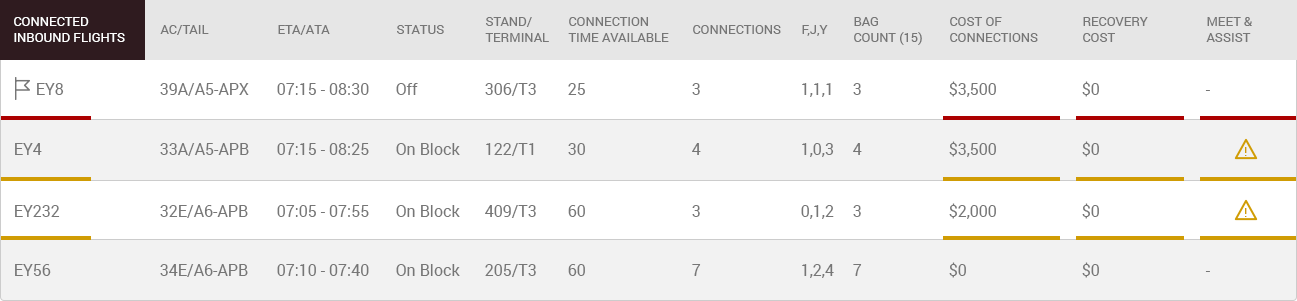
<style>
.page{position:relative;width:1297px;height:301px;background:#ffffff}
.page>*{position:absolute;margin:0}
.t1{font:13px "Roboto-Regular";color:#ffffff;text-transform:uppercase}
.t2{font:13px "Roboto-Regular";color:#767676;text-transform:uppercase}
.t3{font:16px "Roboto-Regular";color:#767676}
.t4{font:13.3px "Roboto-Regular";color:#d09c04}
</style>
<div class="page">
<p class="t1" style="left:14px;top:17px;width:111px;height:25px">Connected<br>Inbound Flights</p>
<p class="t2" style="left:485px;top:17px;width:64px;height:25px">Stand/<br>Terminal</p>
<p class="t2" style="left:568px;top:17px;width:101px;height:25px">Connection<br>Time Available</p>
<p class="t2" style="left:854px;top:17px;width:68px;height:28px">Bag<br>Count (15)</p>
<p class="t2" style="left:950px;top:17px;width:88px;height:25px">Cost of<br>Connections</p>
<p class="t2" style="left:1083px;top:17px;width:65px;height:25px">Recovery<br>Cost</p>
<p class="t2" style="left:1206px;top:17px;width:46px;height:25px">Meet &amp;<br>Assist</p>
<p class="t2" style="left:160px;top:25px;width:49px;height:10px">AC/Tail</p>
<p class="t2" style="left:278px;top:25px;width:52px;height:10px">Eta/Ata</p>
<p class="t2" style="left:397px;top:25px;width:47px;height:9px">Status</p>
<p class="t2" style="left:693px;top:25px;width:88px;height:9px">Connections</p>
<p class="t2" style="left:802px;top:25px;width:26px;height:11px">F,J,Y</p>
<p class="t3" style="left:37px;top:83px;width:27px;height:12px">EY8</p>
<p class="t3" style="left:160px;top:83px;width:89px;height:13px">39A/A5-APX</p>
<p class="t3" style="left:277px;top:83px;width:92px;height:12px">07:15 - 08:30</p>
<p class="t3" style="left:396px;top:83px;width:22px;height:12px">Off</p>
<p class="t3" style="left:485px;top:83px;width:51px;height:13px">306/T3</p>
<p class="t3" style="left:568px;top:83px;width:17px;height:12px">25</p>
<p class="t3" style="left:692px;top:83px;width:8px;height:12px">3</p>
<p class="t3" style="left:802px;top:83px;width:29px;height:14px">1,1,1</p>
<p class="t3" style="left:853px;top:83px;width:8px;height:12px">3</p>
<p class="t3" style="left:949px;top:81px;width:47px;height:16px">$3,500</p>
<p class="t3" style="left:1082px;top:81px;width:17px;height:16px">$0</p>
<p class="t3" style="left:1205px;top:90px;width:5px;height:1px">-</p>
<p class="t3" style="left:15px;top:143px;width:27px;height:12px">EY4</p>
<p class="t3" style="left:160px;top:143px;width:89px;height:13px">33A/A5-APB</p>
<p class="t3" style="left:277px;top:143px;width:92px;height:12px">07:15 - 08:25</p>
<p class="t3" style="left:396px;top:143px;width:64px;height:12px">On Block</p>
<p class="t3" style="left:486px;top:143px;width:48px;height:13px">122/T1</p>
<p class="t3" style="left:568px;top:143px;width:17px;height:12px">30</p>
<p class="t3" style="left:692px;top:143px;width:9px;height:12px">4</p>
<p class="t3" style="left:802px;top:143px;width:32px;height:14px">1,0,3</p>
<p class="t3" style="left:853px;top:143px;width:9px;height:12px">4</p>
<p class="t3" style="left:949px;top:141px;width:47px;height:16px">$3,500</p>
<p class="t3" style="left:1082px;top:141px;width:17px;height:16px">$0</p>
<p class="t4" style="left:1245px;top:147px;width:2px;height:9px">!</p>
<p class="t3" style="left:15px;top:205px;width:45px;height:12px">EY232</p>
<p class="t3" style="left:160px;top:205px;width:88px;height:13px">32E/A6-APB</p>
<p class="t3" style="left:277px;top:205px;width:92px;height:12px">07:05 - 07:55</p>
<p class="t3" style="left:396px;top:205px;width:64px;height:12px">On Block</p>
<p class="t3" style="left:485px;top:205px;width:51px;height:13px">409/T3</p>
<p class="t3" style="left:568px;top:205px;width:17px;height:12px">60</p>
<p class="t3" style="left:692px;top:205px;width:8px;height:12px">3</p>
<p class="t3" style="left:801px;top:205px;width:33px;height:14px">0,1,2</p>
<p class="t3" style="left:853px;top:205px;width:8px;height:12px">3</p>
<p class="t3" style="left:949px;top:203px;width:47px;height:16px">$2,000</p>
<p class="t3" style="left:1082px;top:203px;width:17px;height:16px">$0</p>
<p class="t4" style="left:1245px;top:208px;width:2px;height:9px">!</p>
<p class="t3" style="left:15px;top:264px;width:36px;height:12px">EY56</p>
<p class="t3" style="left:160px;top:264px;width:88px;height:13px">34E/A6-APB</p>
<p class="t3" style="left:277px;top:264px;width:92px;height:12px">07:10 - 07:40</p>
<p class="t3" style="left:396px;top:264px;width:64px;height:12px">On Block</p>
<p class="t3" style="left:485px;top:264px;width:51px;height:13px">205/T3</p>
<p class="t3" style="left:568px;top:264px;width:17px;height:12px">60</p>
<p class="t3" style="left:692px;top:264px;width:9px;height:12px">7</p>
<p class="t3" style="left:802px;top:264px;width:32px;height:14px">1,2,4</p>
<p class="t3" style="left:853px;top:264px;width:9px;height:12px">7</p>
<p class="t3" style="left:949px;top:262px;width:17px;height:16px">$0</p>
<p class="t3" style="left:1082px;top:262px;width:17px;height:16px">$0</p>
<p class="t3" style="left:1205px;top:271px;width:5px;height:1px">-</p>
</div>
